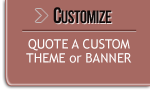
<style>
.page{position:relative;width:150px;height:100px;background:#a66962}
.page>*{position:absolute;margin:0}
.t1{font:18px "BebasNeue";letter-spacing:-0.025em;color:#110a0a}
.t2{font:22px "BebasNeue";letter-spacing:-0.025em;color:#110a0a}
.t3{font:13px/14px "TrebuchetMS";color:#fcfafa}
</style>
<div class="page">
<p class="t1" style="left:53px;top:7px;width:59px;height:17px"><span class="t2">c</span>ustomize</p>
<p class="t3" style="left:26px;top:39px;width:106px;height:24px;text-align:center">QUOTE A CUSTOM<br>THEME or BANNER</p>
</div>
